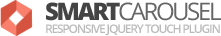
<style>
.page{position:relative;width:221px;height:36px;background:#ffffff}
.page>*{position:absolute;margin:0}
.t1{font:24px "OpenSans";letter-spacing:-0.1em;color:#666666}
.t2{font:24px "OpenSans-Extrabold";letter-spacing:-0.1em;color:#444444}
.t3{font:12px "OpenSans-Semibold";letter-spacing:-0.1em;color:#bbbbbb}
</style>
<div class="page">
<p class="t1" style="left:46px;top:2px;width:175px;height:19px"><span class="t2">SMART</span>CAROUSEL</p>
<p class="t3" style="left:46px;top:24px;width:174px;height:12px">RESPONSIVE JQUERY TOUCH PLUGIN</p>
</div>
